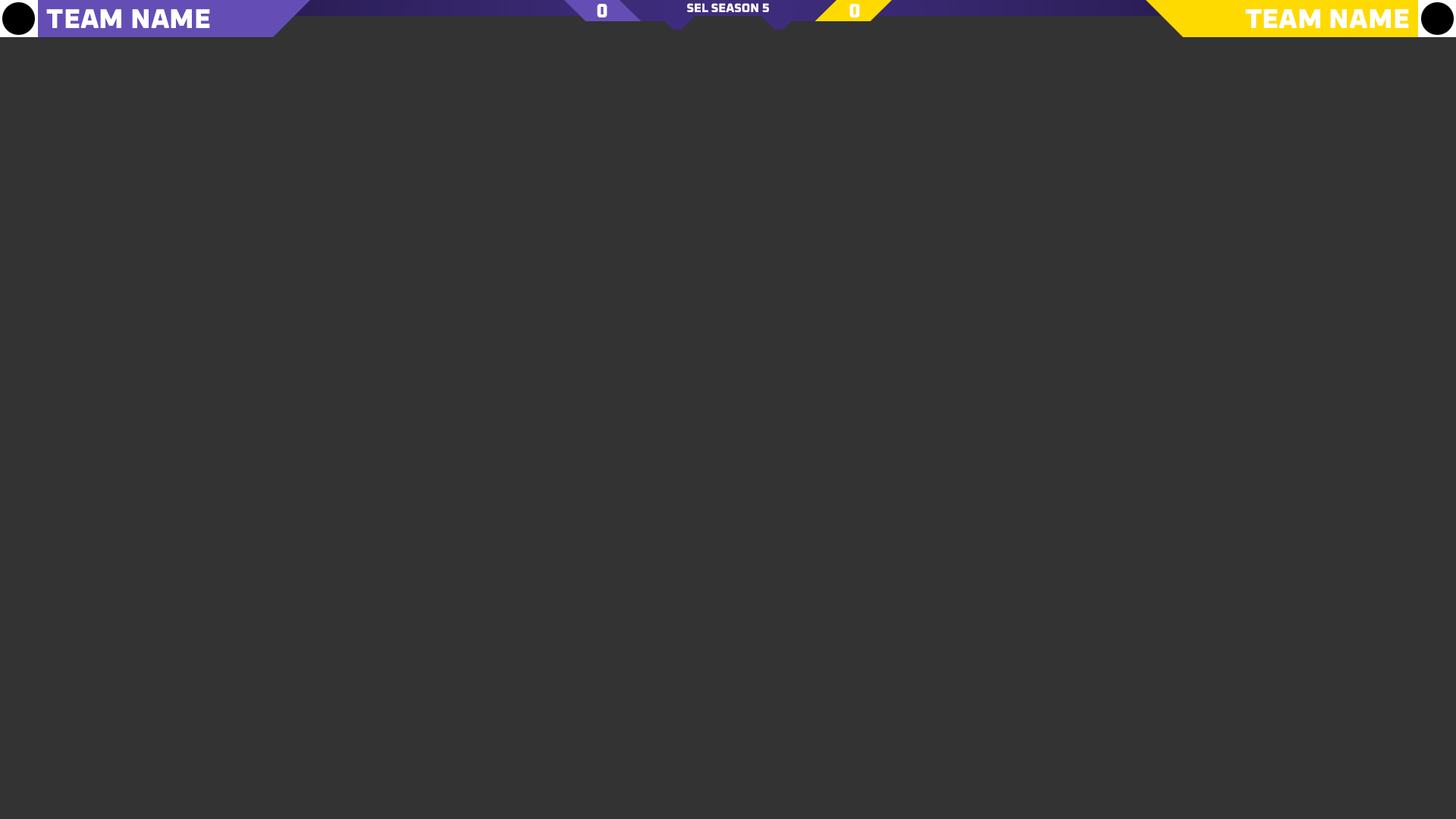
<style>
.page{position:relative;width:1456px;height:819px;background:#333333}
.page>*{position:absolute;margin:0}
.t1{font:19.8px "Oxanium-ExtraBold";color:#ffffff}
.t2{font:12.2px "Oxanium-ExtraBold";color:#ffffff}
.t3{font:27.3px "Oxanium-ExtraBold";color:#ffffff}
</style>
<div class="page">
<p class="t1" style="left:597px;top:4px;width:10px;height:13px">0</p>
<p class="t2" style="left:687px;top:3px;width:82px;height:9px">SEL SEASON 5</p>
<p class="t1" style="left:849px;top:4px;width:11px;height:13px">0</p>
<p class="t3" style="left:46px;top:9px;width:164px;height:19px">TEAM NAME</p>
<p class="t3" style="left:1245px;top:9px;width:164px;height:19px">TEAM NAME</p>
</div>
